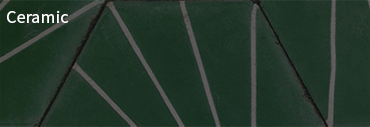
<style>
.page{position:relative;width:370px;height:127px}
.page>*{position:absolute;margin:0}
.t1{font:16px "NotoSansCJKkr-Regular";color:#ffffff}
</style>
<div class="page">
<p class="t1" style="left:7px;top:10px;width:62px;height:13px">Ceramic</p>
</div>
